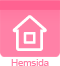
<style>
.page{position:relative;width:60px;height:66px;background:#ff81a7}
.page>*{position:absolute;margin:0}
.t1{font:9.6px "ArialMT";color:#ff7da4}
</style>
<div class="page">
<p class="t1" style="left:11px;top:59px;width:38px;height:7px">Hemsida</p>
</div>
